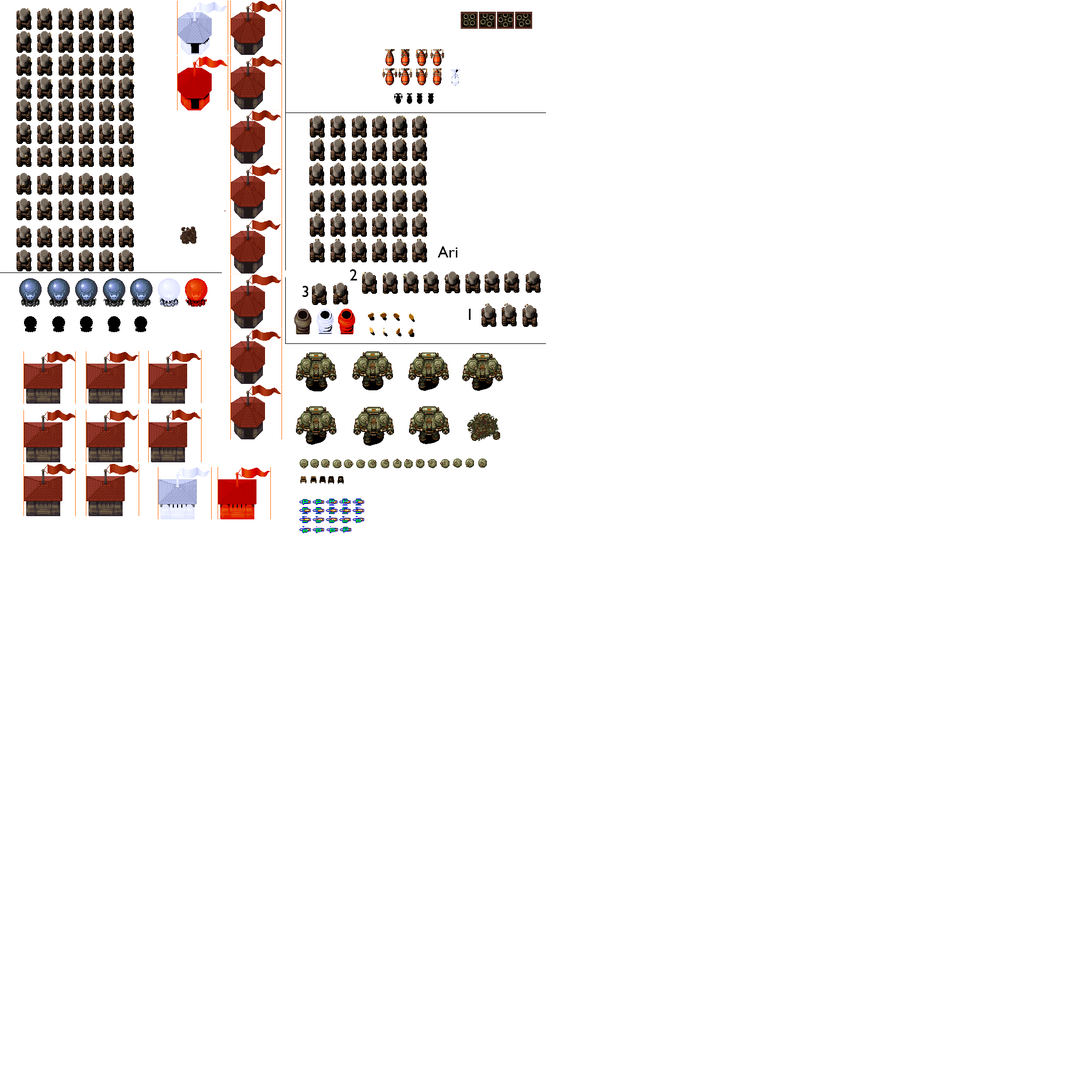
<style>
.page{position:relative;width:1092px;height:1092px;background:#ffffff}
.page>*{position:absolute;margin:0}
.t1{font:16px "GillSansMT";color:#000000}
</style>
<div class="page">
<p class="t1" style="left:438px;top:246px;width:19px;height:12px">Ari</p>
<p class="t1" style="left:350px;top:269px;width:7px;height:11px">2</p>
<p class="t1" style="left:302px;top:286px;width:7px;height:11px">3</p>
<p class="t1" style="left:469px;top:309px;width:2px;height:11px">1</p>
</div>
